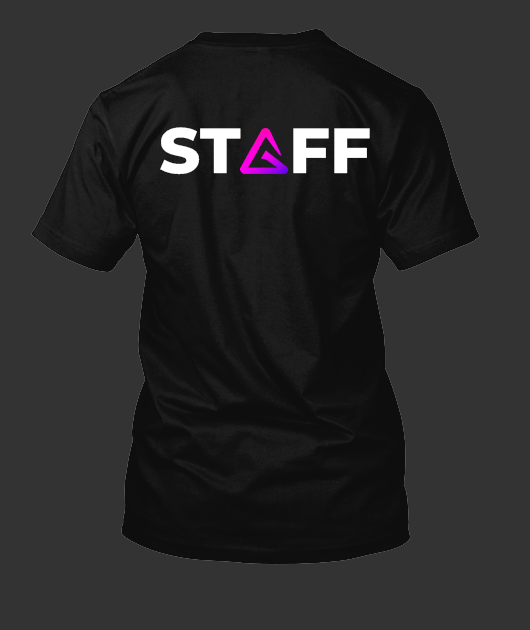
<style>
.page{position:relative;width:530px;height:630px;background:#333333}
.page>*{position:absolute;margin:0}
.t1{font:63.6px "MontserratRoman-ExtraBold";color:#ffffff}
</style>
<div class="page">
<p class="t1" style="left:160px;top:127px;width:81px;height:48px">ST</p>
<p class="t1" style="left:293px;top:128px;width:77px;height:46px">FF</p>
</div>
